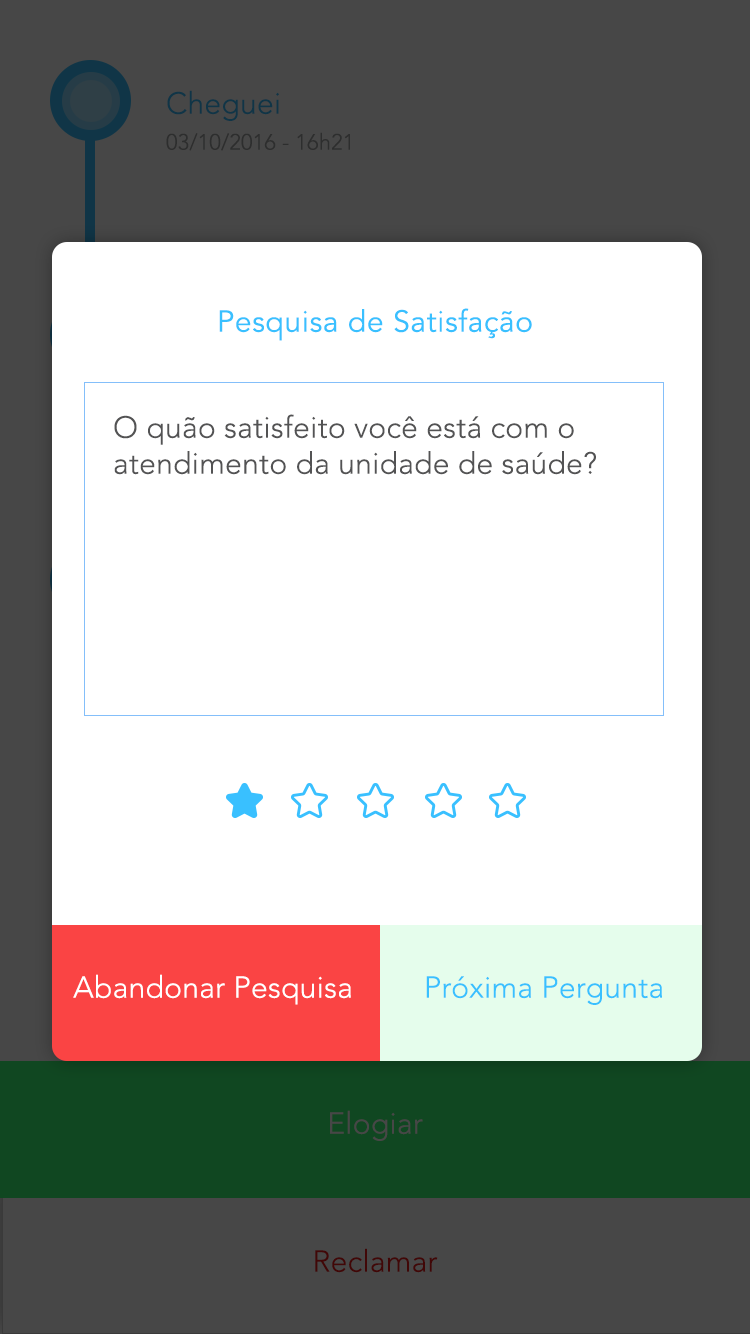
<style>
.page{position:relative;width:750px;height:1334px;background:#ffffff}
.page>*{position:absolute;margin:0}
.t1{font:30px "AvenirLTStd-Light";letter-spacing:0.01em;color:#103547}
.t2{font:22px "AvenirLTStd-Light";letter-spacing:0.01em;color:#2d2e2e}
.t3{font:30px "AvenirLTStd-Book";letter-spacing:0.02em;color:#39c0ff}
.t4{font:30px "AvenirLTStd-Light";letter-spacing:0.01em;color:#535354}
.t5{font:30px "AvenirLTStd-Light";letter-spacing:0.01em;color:#ffffff}
.t6{font:30px "AvenirLTStd-Light";letter-spacing:0.01em;color:#39c0ff}
.t7{font:30px "AvenirLTStd-Light";letter-spacing:0.01em;color:#474747}
.t8{font:30px "AvenirLTStd-Light";letter-spacing:0.01em;color:#410707}
</style>
<div class="page">
<p class="t1" style="left:167px;top:90px;width:112px;height:31px">Cheguei</p>
<p class="t2" style="left:166px;top:132px;width:184px;height:19px">03/10/2016 - 16h21</p>
<p class="t3" style="left:219px;top:308px;width:313px;height:33px">Pesquisa de Satisfação</p>
<p class="t4" style="left:114px;top:414px;width:482px;height:61px">O quão satisfeito você está com o <br>atendimento da unidade de saúde?</p>
<p class="t5" style="left:73px;top:974px;width:278px;height:31px">Abandonar Pesquisa</p>
<p class="t6" style="left:426px;top:976px;width:236px;height:29px">Próxima Pergunta</p>
<p class="t7" style="left:330px;top:1110px;width:93px;height:31px">Elogiar</p>
<p class="t8" style="left:315px;top:1248px;width:123px;height:25px">Reclamar</p>
</div>
